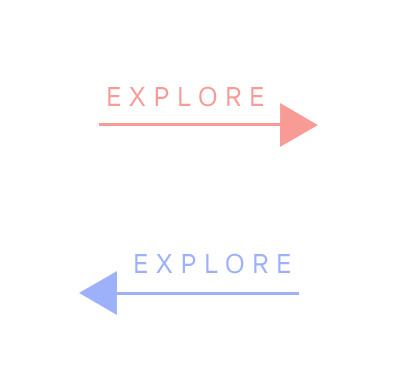
<style>
.page{position:relative;width:409px;height:391px;background:#ffffff}
.page>*{position:absolute;margin:0}
.t1{font:28.3px "SukhumvitSet-Medium";letter-spacing:0.26em;color:#f89b97}
.t2{font:28.3px "SukhumvitSet-Medium";letter-spacing:0.26em;color:#9cb1fa}
</style>
<div class="page">
<p class="t1" style="left:108px;top:86px;width:155px;height:21px">EXPLORE</p>
<p class="t2" style="left:135px;top:253px;width:155px;height:21px">EXPLORE</p>
</div>
